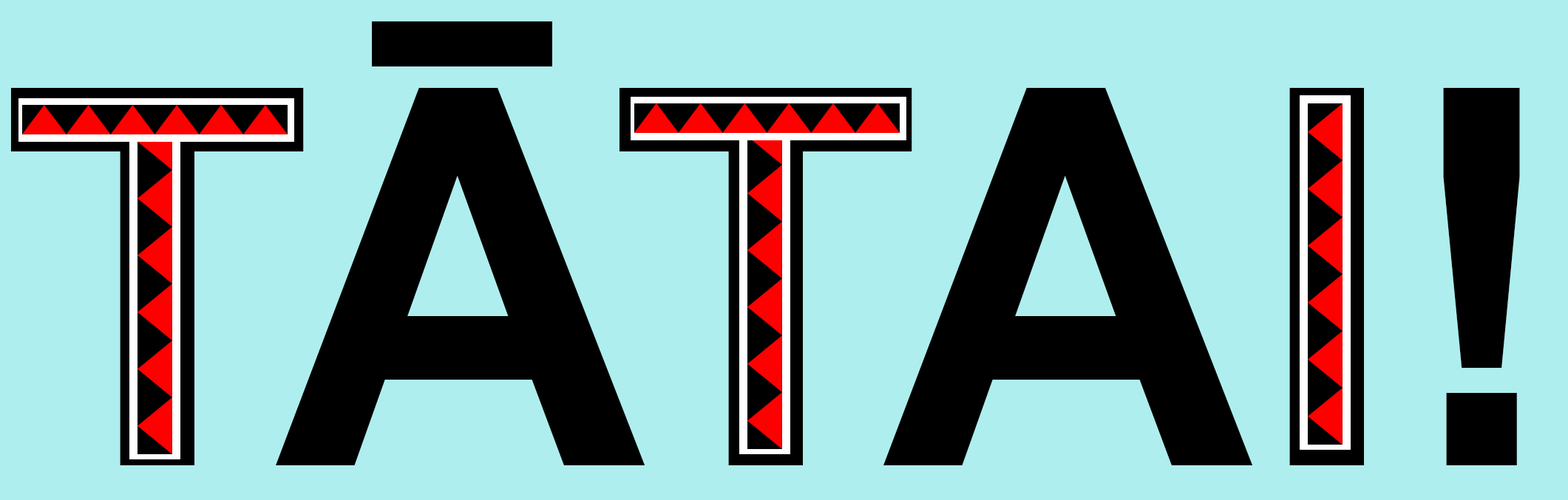
<style>
.page{position:relative;width:1568px;height:500px;background:#afeeee}
.page>*{position:absolute;margin:0}
.t1{font:526.8px "Arial-BoldMT";color:#000000}
</style>
<div class="page">
<p class="t1" style="left:10px;top:88px;width:1510px;height:378px">TATAI!</p>
</div>
